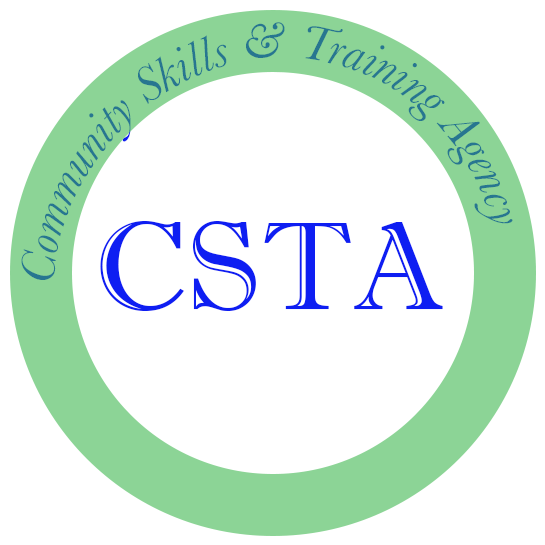
<style>
.page{position:relative;width:545px;height:545px;background:#ffffff}
.page>*{position:absolute;margin:0}
.t1{font:50px "Baskerville-Italic";color:#277690}
.t2{font:125px "ImprintMT-Shadow";color:#0e1ef2}
</style>
<div class="page">
<p class="t1" style="left:21px;top:22px;width:492px;height:258px">Community Skills &amp; Training Agency</p>
<p class="t2" style="left:100px;top:221px;width:343px;height:90px">CSTA</p>
</div>
